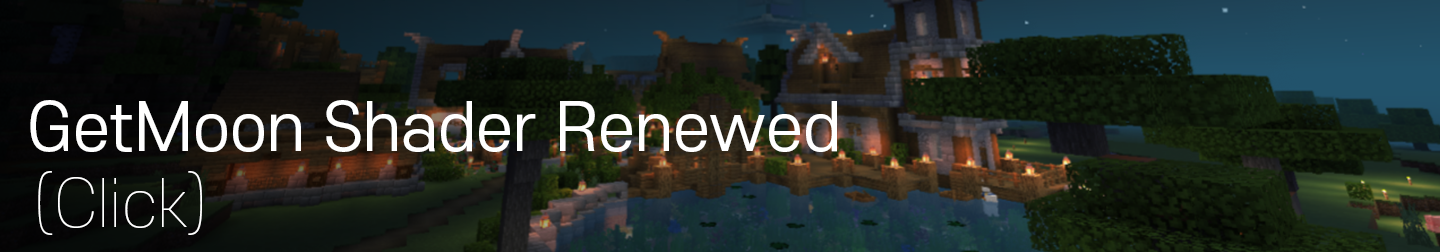
<style>
.page{position:relative;width:1440px;height:252px}
.page>*{position:absolute;margin:0}
.t1{font:64px "S-CoreDream-4Regular";color:#ffffff}
.t2{font:64px "S-CoreDream-1Thin";color:#ffffff}
</style>
<div class="page">
<p class="t1" style="left:30px;top:100px;width:807px;height:52px">GetMoon Shader Renewed</p>
<p class="t2" style="left:38px;top:171px;width:164px;height:64px">(Click)</p>
</div>
